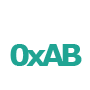
<style>
.page{position:relative;width:90px;height:90px;background:#ffffff}
.page>*{position:absolute;margin:0}
.t1{font:30px "Verdana-Bold";letter-spacing:-0.15em;color:#20a493}
</style>
<div class="page">
<p class="t1" style="left:10px;top:44px;width:72px;height:22px">0xAB</p>
</div>
